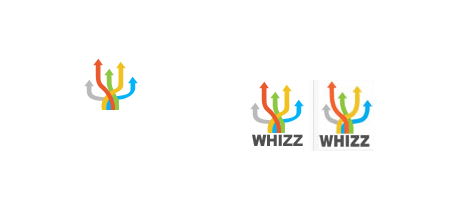
<style>
.page{position:relative;width:454px;height:222px;background:#ffffff}
.page>*{position:absolute;margin:0}
.t1{font:15.8px "Arial-Black";color:#505050;text-transform:uppercase;scale:0.88 1}
</style>
<div class="page">
<p class="t1" style="left:252px;top:134px;width:51px;height:12px">WHIZZ</p>
</div>
